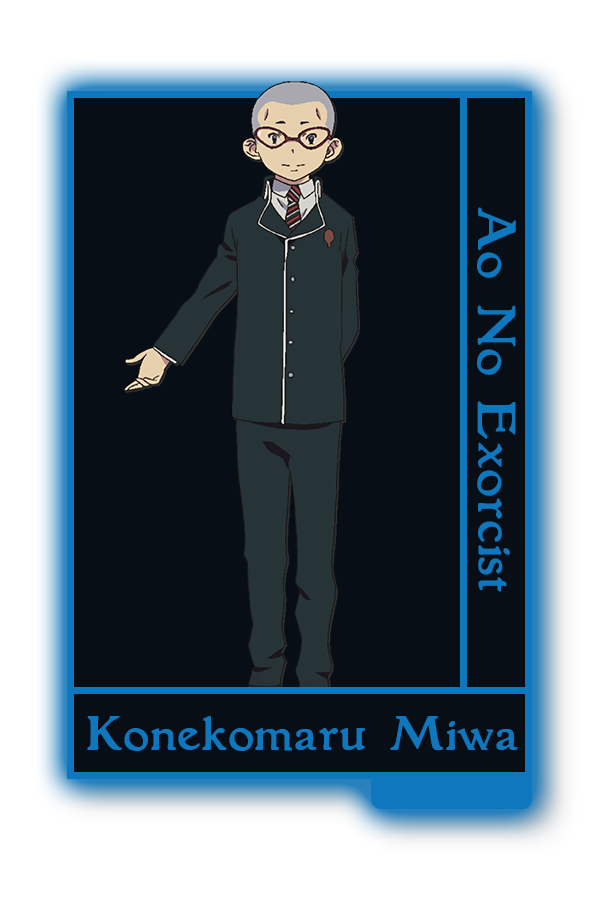
<style>
.page{position:relative;width:600px;height:900px;background:#070e16}
.page>*{position:absolute;margin:0}
.t1{font:48.8px "Grantham-Roman";color:#0f77be}
.t2{font:45.6px "Grantham-Roman";color:#0f77be}
</style>
<div class="page">
<p class="t1" style="left:477px;top:207px;width:39px;height:385px;rotate:90deg">Ao No Exorcist</p>
<p class="t2" style="left:87px;top:716px;width:431px;height:35px">Konekomaru Miwa</p>
</div>
